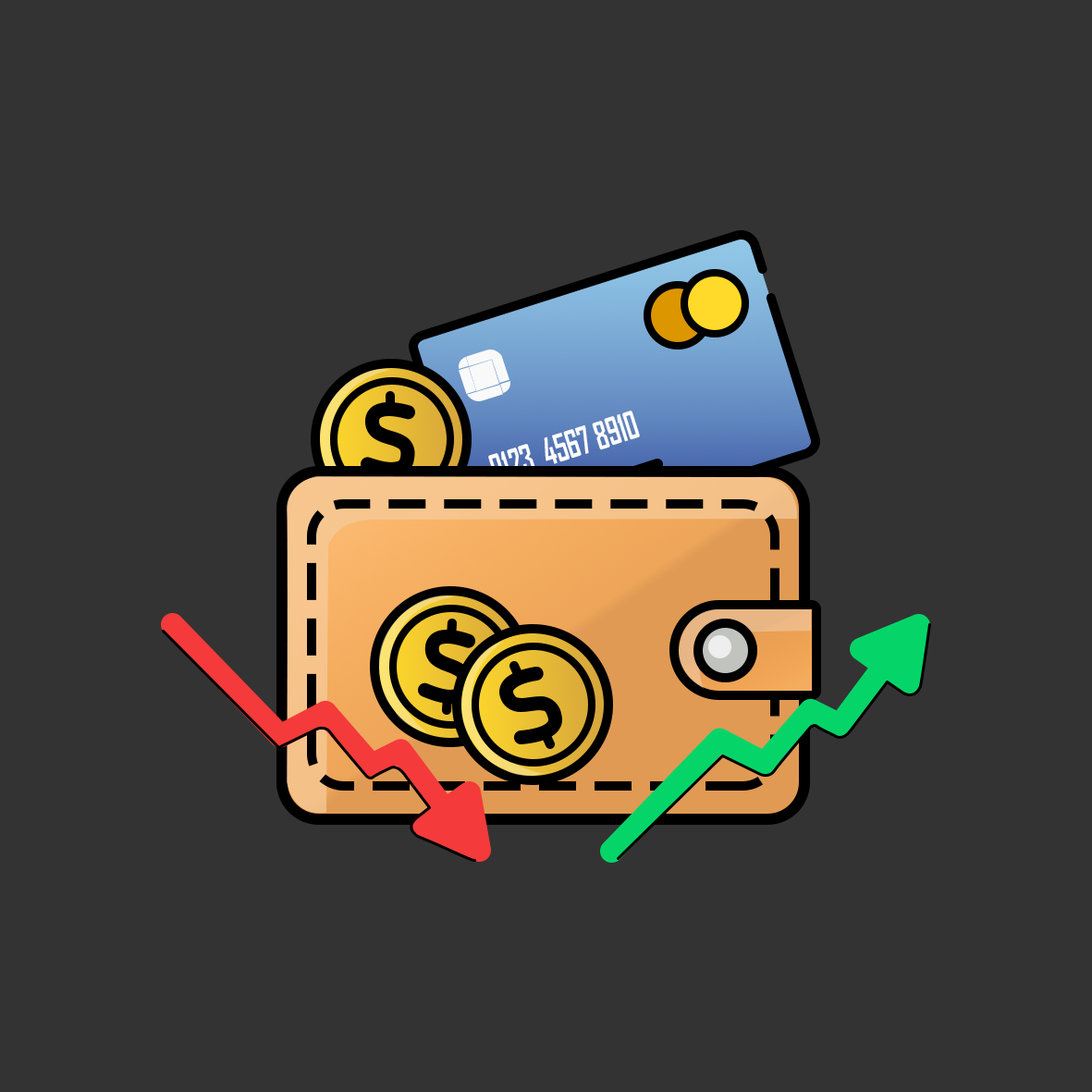
<style>
.page{position:relative;width:1092px;height:1092px;background:#333333}
.page>*{position:absolute;margin:0}
.t1{font:36.1px "AgencyFB-Bold";color:#fcfcfc}
</style>
<div class="page">
<p class="t1" style="left:488px;top:411px;width:152px;height:72px;rotate:-18deg">0123  4567 8910</p>
</div>
